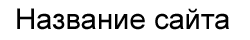
<style>
.page{position:relative;width:250px;height:40px;background:#ffffff}
.page>*{position:absolute;margin:0}
.t1{font:28.5px "ArialMT";color:#000000}
</style>
<div class="page">
<p class="t1" style="left:17px;top:8px;width:212px;height:22px">Название сайта</p>
</div>
